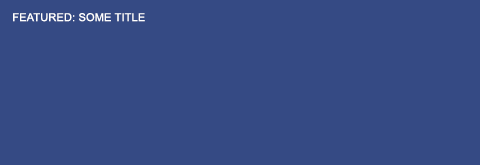
<style>
.page{position:relative;width:480px;height:165px;background:#354a84}
.page>*{position:absolute;margin:0}
.t1{font:11px "ArialMT";letter-spacing:0.015em;color:#ffffff}
</style>
<div class="page">
<p class="t1" style="left:13px;top:13px;width:132px;height:9px">FEATURED: SOME TITLE</p>
</div>
